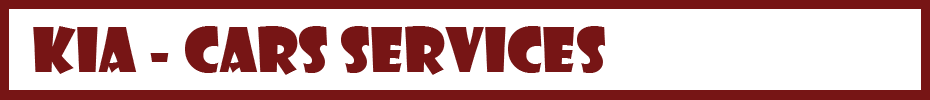
<style>
.page{position:relative;width:930px;height:100px;background:#ffffff}
.page>*{position:absolute;margin:0}
.t1{font:60px "ShowcardGothic-Reg";color:#771515}
</style>
<div class="page">
<p class="t1" style="left:33px;top:26px;width:573px;height:49px">KIA - CARS SERVICES</p>
</div>
